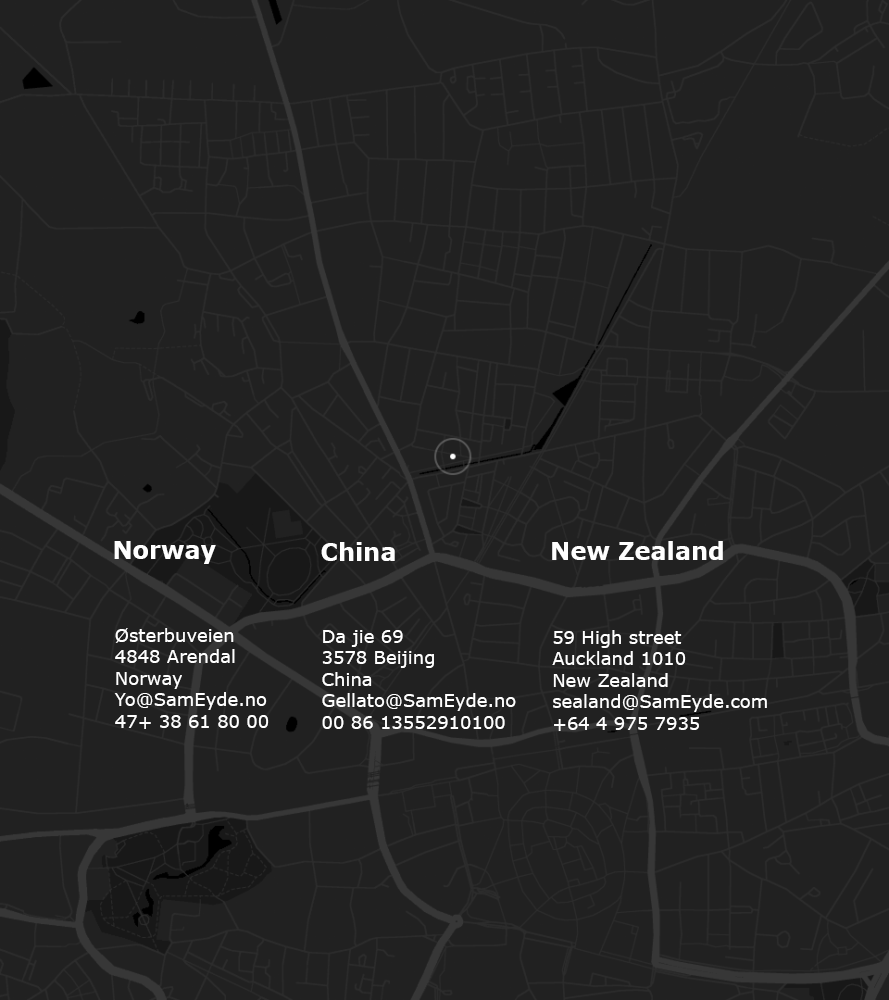
<style>
.page{position:relative;width:889px;height:1000px;background:#212121}
.page>*{position:absolute;margin:0}
.t1{font:24px "Verdana-Bold";color:#ffffff}
.t2{font:18px "Verdana";color:#ffffff}
</style>
<div class="page">
<p class="t1" style="left:114px;top:541px;width:102px;height:23px">Norway</p>
<p class="t1" style="left:321px;top:542px;width:74px;height:19px">China</p>
<p class="t1" style="left:552px;top:541px;width:171px;height:19px">New Zealand</p>
<p class="t2" style="left:114px;top:628px;width:155px;height:101px">Østerbuveien<br>4848 Arendal<br>Norway<br>Yo@SamEyde.no<br>47+ 38 61 80 00</p>
<p class="t2" style="left:322px;top:630px;width:194px;height:99px">Da jie 69<br>3578 Beijing<br>China<br>Gellato@SamEyde.no<br>00 86 13552910100</p>
<p class="t2" style="left:552px;top:630px;width:215px;height:101px">59 High street <br>Auckland 1010<br>New Zealand<br>sealand@SamEyde.com<br>+64 4 975 7935</p>
</div>
